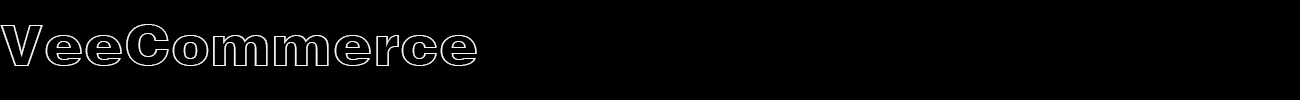
<style>
.page{position:relative;width:1300px;height:100px;background:#000000}
.page>*{position:absolute;margin:0}
.t1{font:57.4px "Swiss721BT-BlackOutline";letter-spacing:0.01em;color:#f6f6f6;scale:1.03 1}
</style>
<div class="page">
<p class="t1" style="left:0px;top:24px;width:477px;height:42px">VeeCommerce</p>
</div>
